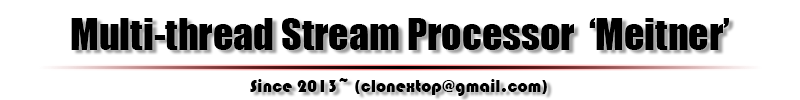
<style>
.page{position:relative;width:800px;height:100px;background:#ffffff}
.page>*{position:absolute;margin:0}
.t1{font:40px "Impact";color:#000000}
.t2{font:18px "Bauhaus93";color:#000000}
</style>
<div class="page">
<p class="t1" style="left:71px;top:18px;width:658px;height:32px">Multi-thread Stream Processor  ‘Meitner’</p>
<p class="t2" style="left:250px;top:78px;width:297px;height:18px">Since 2013~ (clonextop@gmail.com)</p>
</div>
